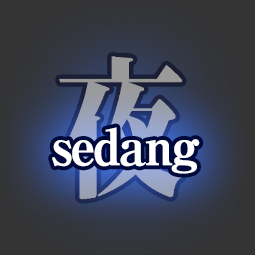
<style>
.page{position:relative;width:255px;height:255px}
.page>*{position:absolute;margin:0}
.t1{font:50px "RyuminPro-ExBold";letter-spacing:-0.08em;color:#ffffff;font-weight:bold}
</style>
<div class="page">
<p class="t1" style="left:52px;top:127px;width:148px;height:47px">sedang</p>
</div>
